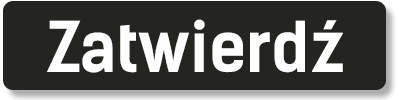
<style>
.page{position:relative;width:400px;height:100px;background:#242420}
.page>*{position:absolute;margin:0}
.t1{font:66.7px "KelsonSansBG-Bold";color:#ffffff}
</style>
<div class="page">
<p class="t1" style="left:47px;top:19px;width:296px;height:54px">Zatwierdź</p>
</div>
